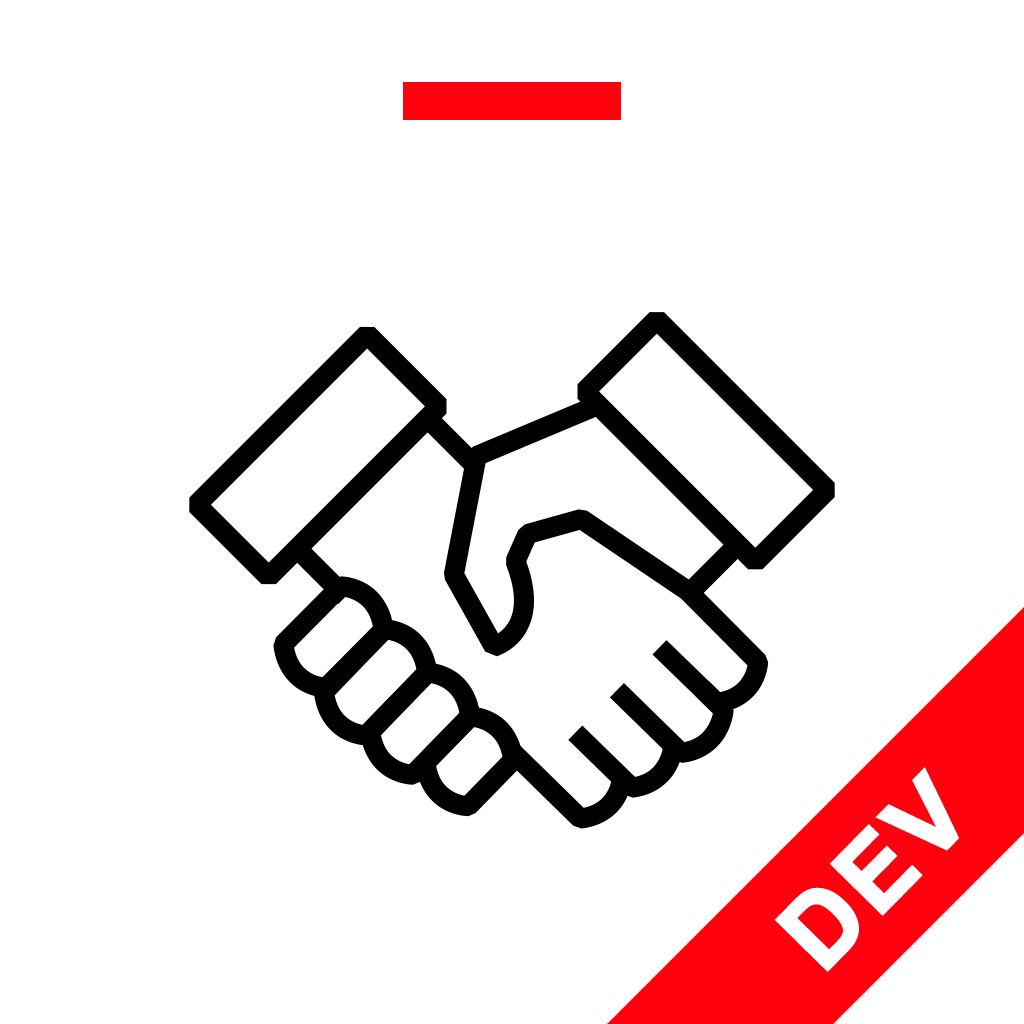
<style>
.page{position:relative;width:1024px;height:1024px;background:#ffffff}
.page>*{position:absolute;margin:0}
.t1{font:100px "Arial-BoldMT";color:#ffffff;text-transform:uppercase;font-weight:bold}
</style>
<div class="page">
<p class="t1" style="left:774px;top:767px;width:186px;height:205px;rotate:-45deg">DEV</p>
</div>
